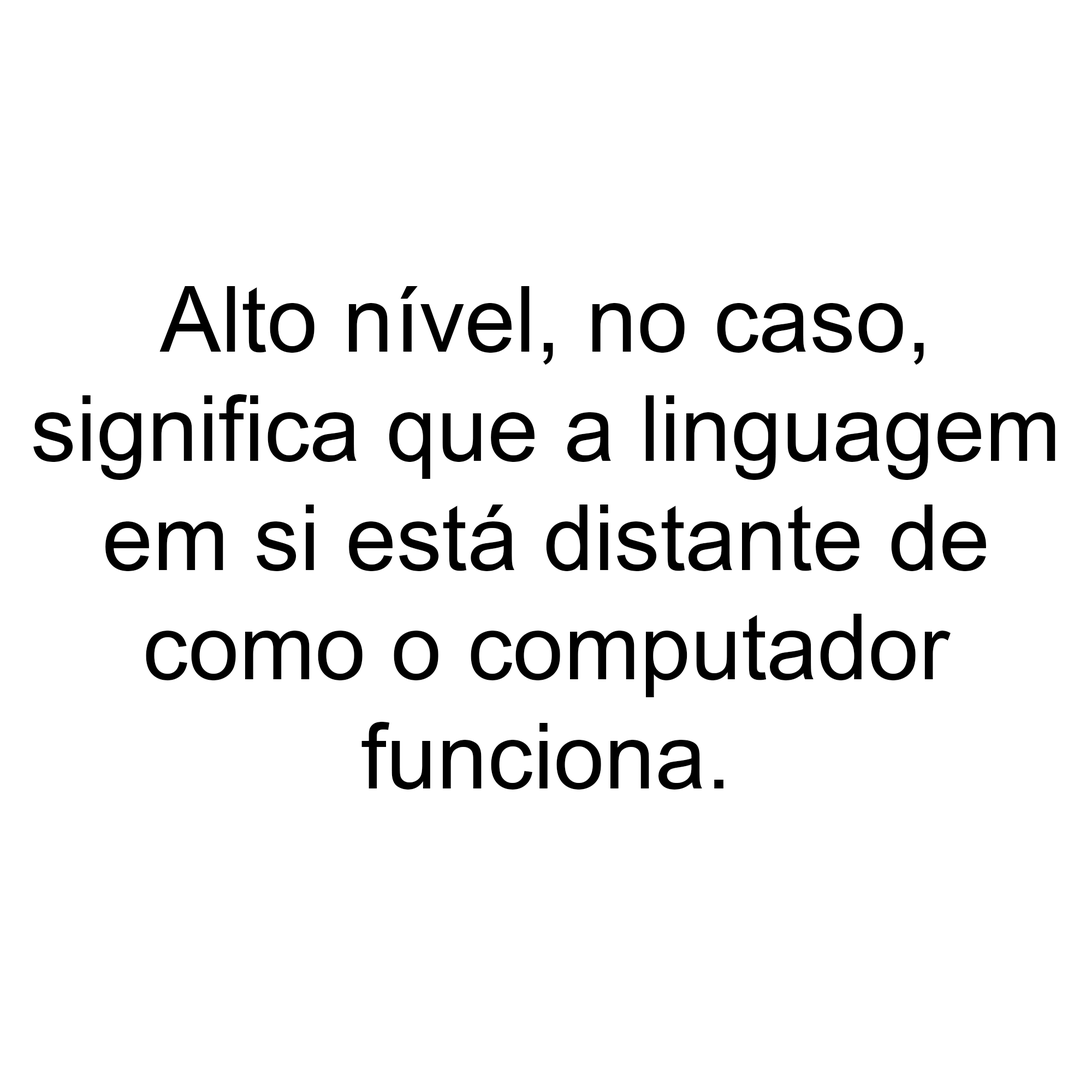
<style>
.page{position:relative;width:1092px;height:1092px;background:#ffffff}
.page>*{position:absolute;margin:0}
.t1{font:91px "ArialMT";color:#000000}
</style>
<div class="page">
<p class="t1" style="left:33px;top:286px;width:1022px;height:504px;text-align:center">Alto nível, no caso,<br>significa que a linguagem<br>em si está distante de<br>como o computador<br>funciona.</p>
</div>
